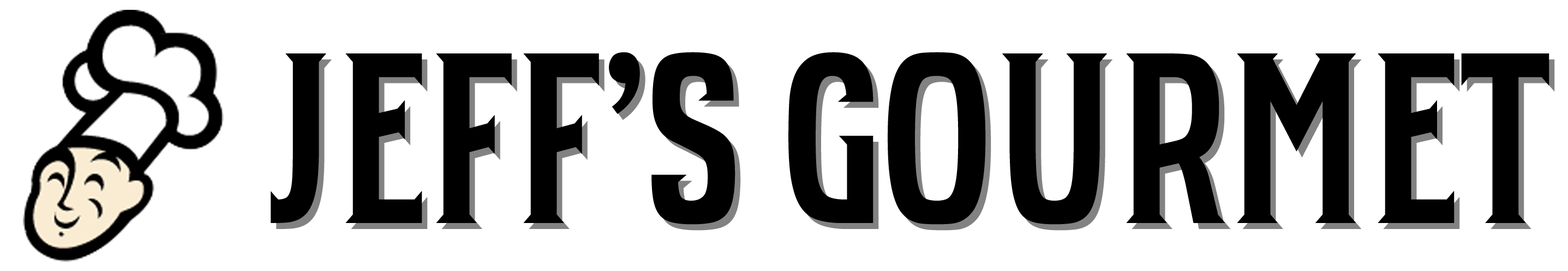
<style>
.page{position:relative;width:1568px;height:271px;background:#ffffff}
.page>*{position:absolute;margin:0}
.t1{font:242.5px "BartenderW01-Regular";letter-spacing:-0.03em;color:#000000}
</style>
<div class="page">
<p class="t1" style="left:271px;top:52px;width:1278px;height:173px">JEFF’S GOURMET</p>
<p class="t1" style="left:276px;top:58px;width:1279px;height:173px;opacity:0.49">JEFF’S GOURMET</p>
</div>
